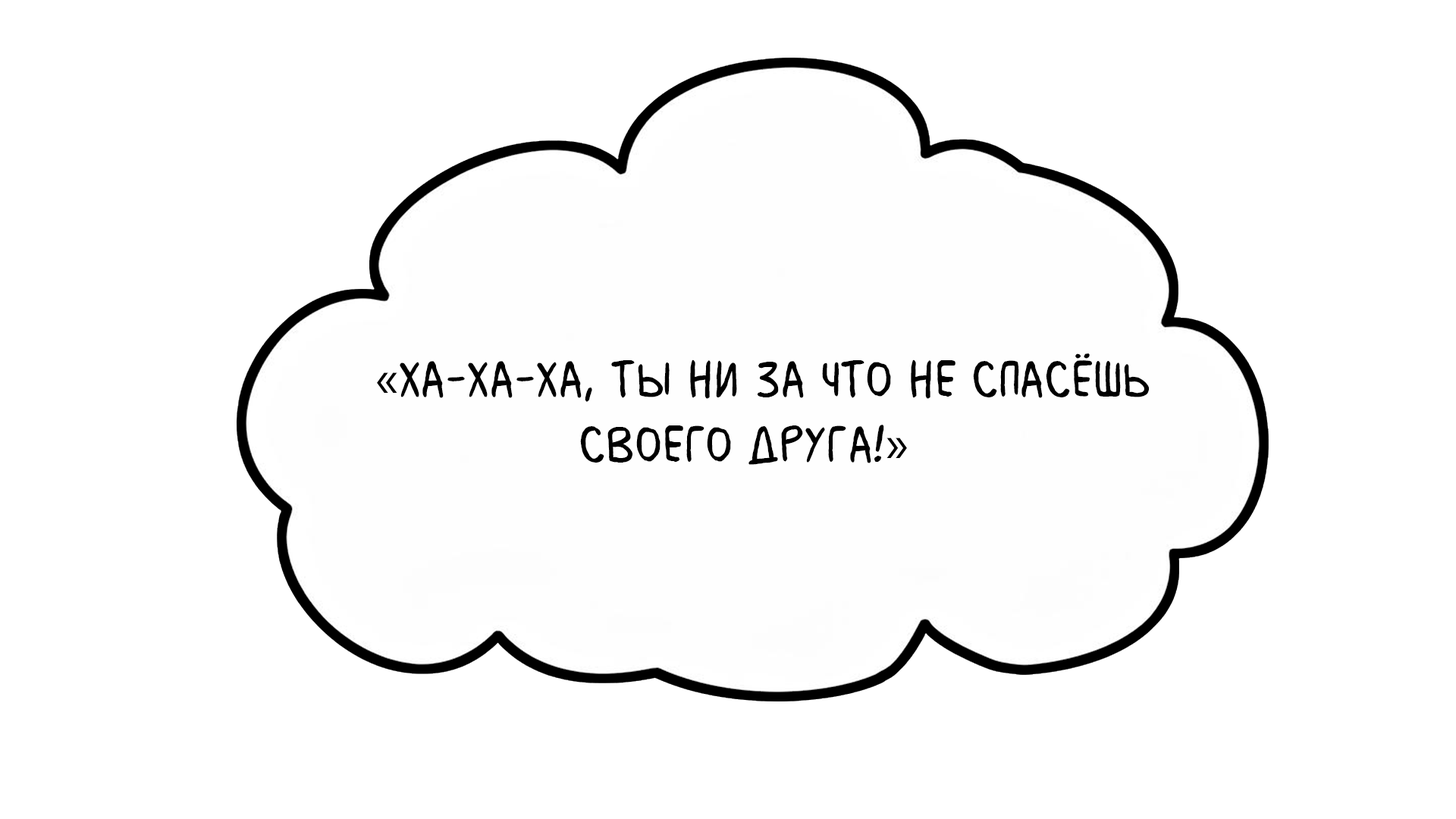
<style>
.page{position:relative;width:1456px;height:819px;background:#ffffff}
.page>*{position:absolute;margin:0}
.t1{font:54.6px "MilkMustacheBB";color:#000000}
.t2{font:54.6px "MyriadPro-Regular";color:#000000}
</style>
<div class="page">
<p class="t1" style="left:377px;top:353px;width:772px;height:112px"><span class="t2">«</span>Ха-ха-ха, ты ни за что не спасёшь <br>              своего друга!<span class="t2">»</span></p>
</div>
